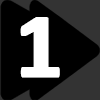
<style>
.page{position:relative;width:100px;height:100px;background:#000000}
.page>*{position:absolute;margin:0}
.t1{font:93.5px "Calibri-Bold";color:#ffffff;font-weight:bold}
</style>
<div class="page">
<p class="t1" style="left:20px;top:17px;width:40px;height:61px">1</p>
</div>
